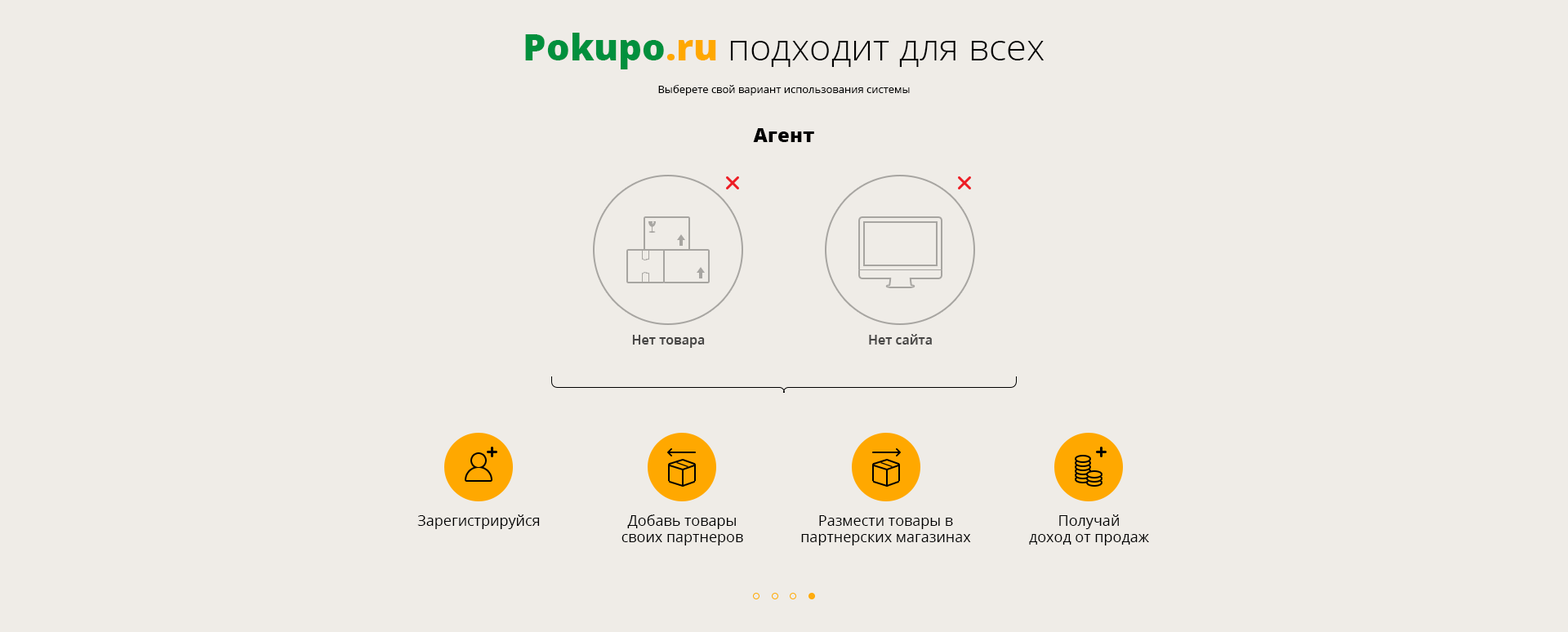
<style>
.page{position:relative;width:1568px;height:632px;background:#efece7}
.page>*{position:absolute;margin:0}
.t1{font:10.6px/16.3px "OpenSans";color:#000000}
.t2{font:36.8px/16.3px "OpenSans-Extrabold";color:#02903d}
.t3{font:36.8px/16.3px "OpenSans-Extrabold";color:#ffa800}
.t4{font:36.8px/16.3px "OpenSans-Light";color:#000000}
.t5{font:19.6px "OpenSans-Extrabold";color:#000000}
.t6{font:14.7px "OpenSans";color:#000000}
.t7{font:14.7px/16.3px "OpenSans";color:#000000}
</style>
<div class="page">
<p class="t1" style="left:525px;top:33px;width:519px;height:63px;text-align:center"><span class="t2">Pokupo</span><span class="t3">.ru</span><span class="t4"> подходит для всех<br><br></span>Выберете свой вариант использования системы</p>
<p class="t1" style="left:525px;top:33px;width:519px;height:63px;text-align:center"><span class="t2">Pokupo</span><span class="t3">.ru</span><span class="t4"> подходит для всех<br><br></span>Выберете свой вариант использования системы</p>
<p class="t1" style="left:525px;top:33px;width:519px;height:63px;text-align:center"><span class="t2">Pokupo</span><span class="t3">.ru</span><span class="t4"> подходит для всех<br><br></span>Выберете свой вариант использования системы</p>
<p class="t1" style="left:525px;top:33px;width:519px;height:63px;text-align:center"><span class="t2">Pokupo</span><span class="t3">.ru</span><span class="t4"> подходит для всех<br><br></span>Выберете свой вариант использования системы</p>
<p class="t5" style="left:753px;top:128px;width:61px;height:14px">Агент</p>
<p class="t6" style="left:417px;top:514px;width:123px;height:15px">Зарегистрируйся</p>
<p class="t6" style="left:417px;top:514px;width:123px;height:15px">Зарегистрируйся</p>
<p class="t6" style="left:417px;top:514px;width:123px;height:15px">Зарегистрируйся</p>
<p class="t6" style="left:417px;top:514px;width:123px;height:15px">Зарегистрируйся</p>
<p class="t7" style="left:621px;top:514px;width:122px;height:32px;text-align:center">Добавь товары<br>своих партнеров</p>
<p class="t7" style="left:801px;top:515px;width:170px;height:31px;text-align:center">Размести товары в<br>партнерских магазинах</p>
<p class="t7" style="left:801px;top:515px;width:170px;height:31px;text-align:center">Размести товары в<br>партнерских магазинах</p>
<p class="t7" style="left:1029px;top:514px;width:120px;height:32px;text-align:center">Получай<br>доход от продаж</p>
<p class="t7" style="left:1029px;top:514px;width:120px;height:32px;text-align:center">Получай<br>доход от продаж</p>
<p class="t7" style="left:1029px;top:514px;width:120px;height:32px;text-align:center">Получай<br>доход от продаж</p>
<p class="t7" style="left:1029px;top:514px;width:120px;height:32px;text-align:center">Получай<br>доход от продаж</p>
</div>
